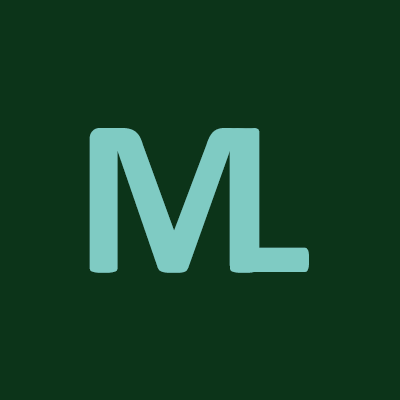
<style>
.page{position:relative;width:400px;height:400px;background:#0c3419}
.page>*{position:absolute;margin:0}
.t1{font:228px "Calibri-Bold";color:#80ccc4}
</style>
<div class="page">
<p class="t1" style="left:89px;top:127px;width:220px;height:146px">ML</p>
</div>
